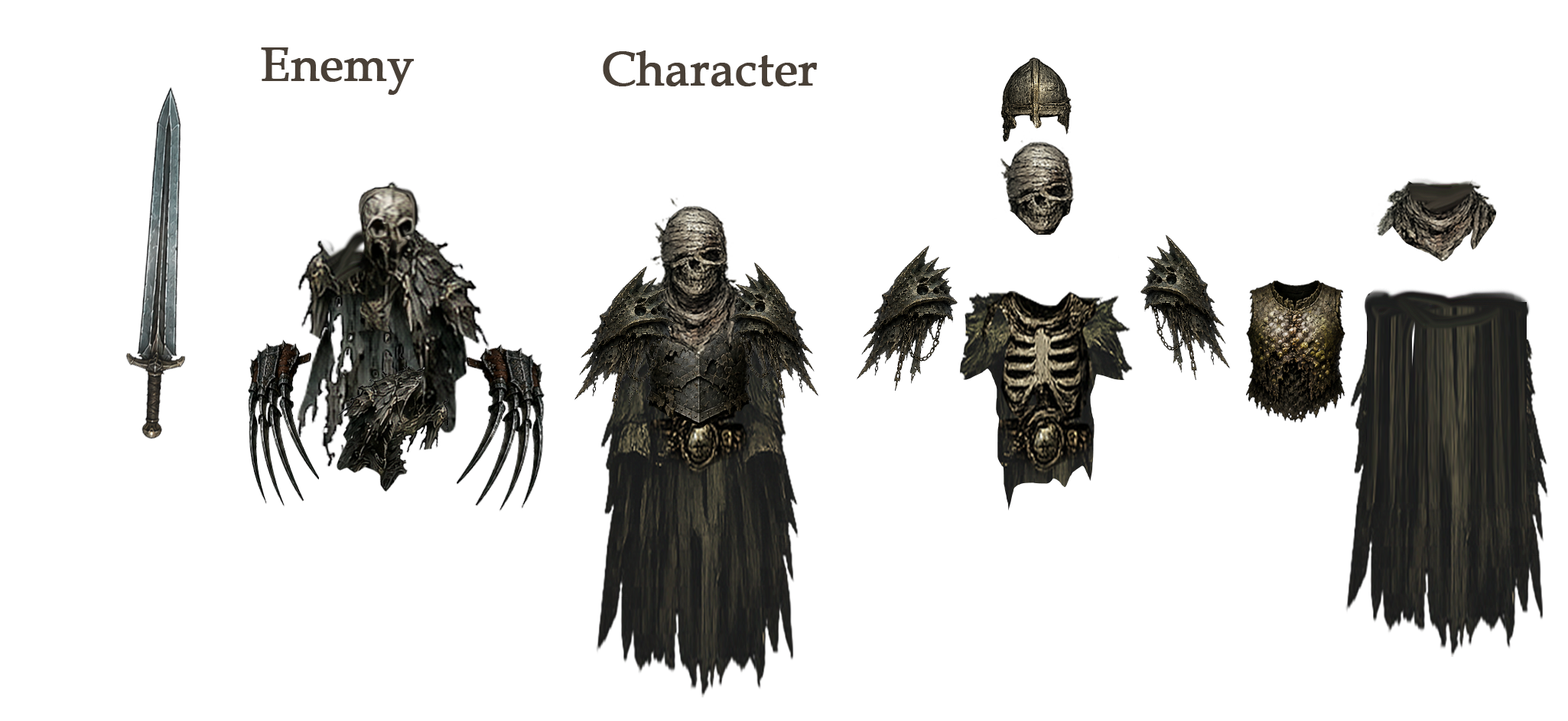
<style>
.page{position:relative;width:1568px;height:721px;background:#ffffff}
.page>*{position:absolute;margin:0}
.t1{font:47.4px "BookAntiqua";color:#494037;font-weight:bold}
</style>
<div class="page">
<p class="t1" style="left:261px;top:47px;width:153px;height:48px">Enemy</p>
<p class="t1" style="left:603px;top:50px;width:214px;height:36px">Character</p>
</div>
